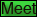
<style>
.page{position:relative;width:37px;height:17px}
.page>*{position:absolute;margin:0}
.t1{font:16px "Helvetica";color:#151006}
</style>
<div class="page">
<p class="t1" style="left:1px;top:2px;width:35px;height:12px">Meet</p>
</div>
